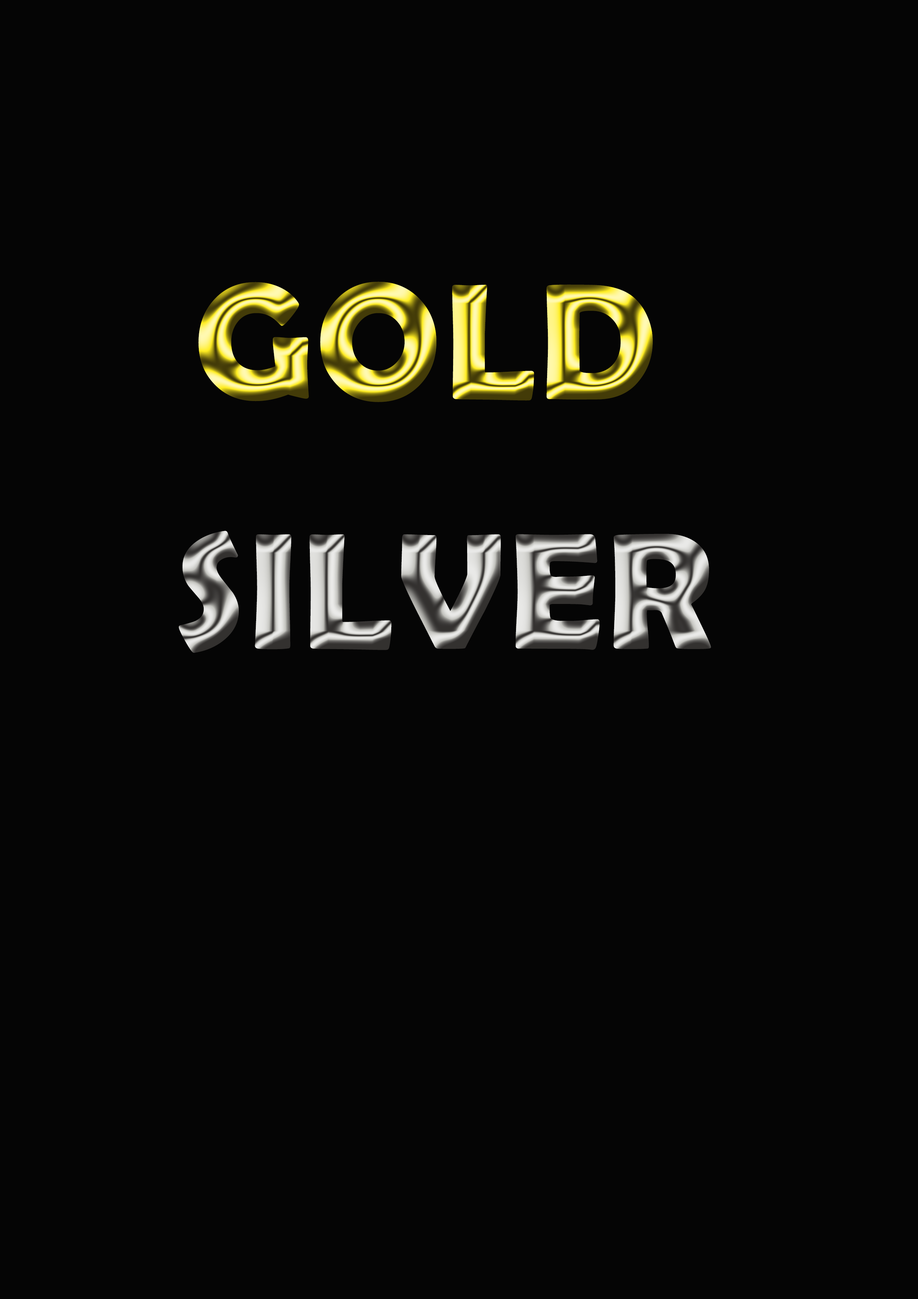
<style>
.page{position:relative;width:918px;height:1299px;background:#050505}
.page>*{position:absolute;margin:0}
.t1{font:165.1px "BerlinSansFBDemi-Bold";font-weight:bold}
</style>
<div class="page">
<p class="t1" style="left:198px;top:281px;width:455px;height:121px">GOLD</p>
<p class="t1" style="left:179px;top:531px;width:532px;height:122px">SILVER</p>
</div>
